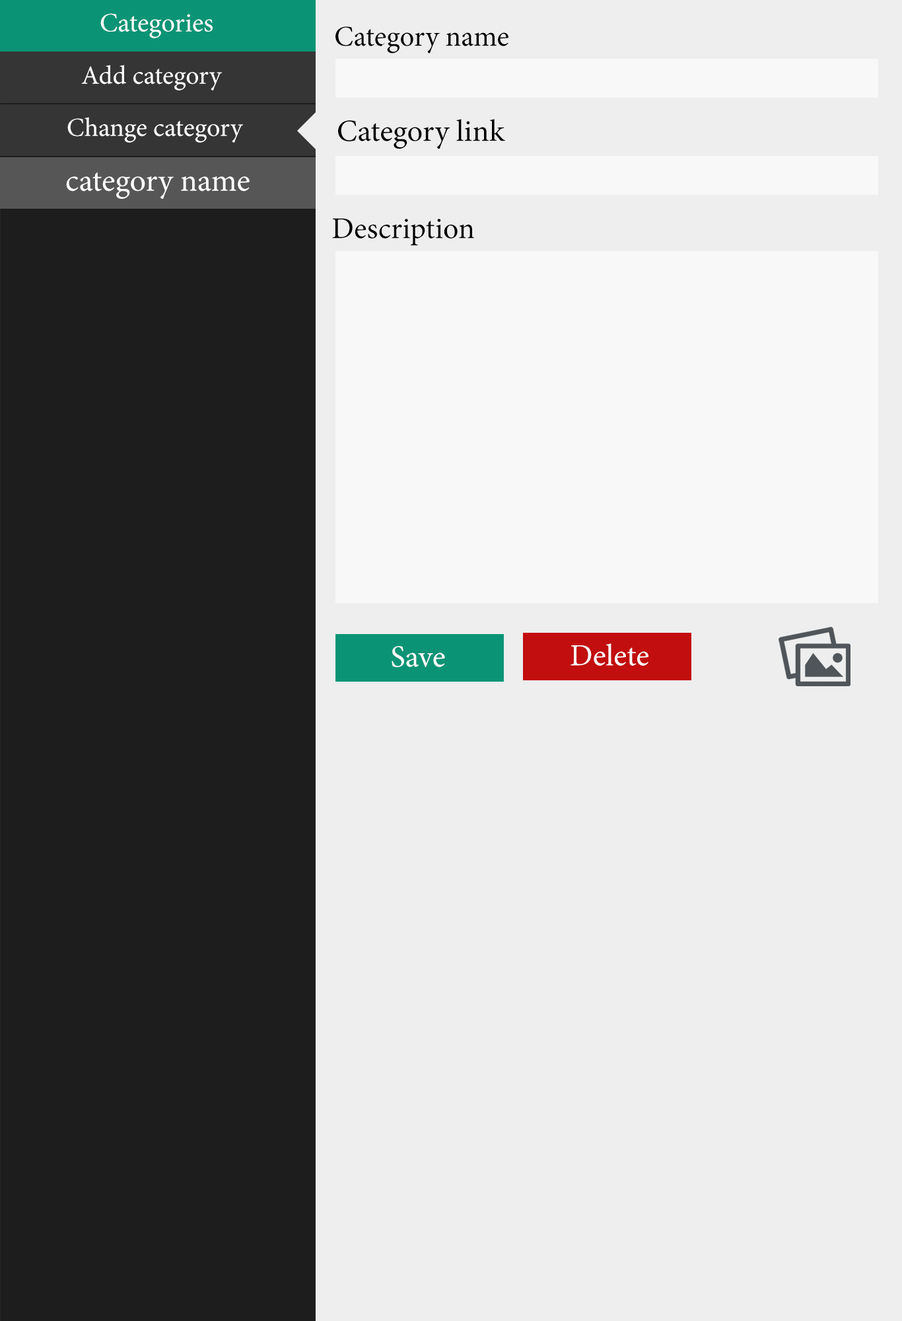
<style>
.page{position:relative;width:902px;height:1321px;background:#eeeeee}
.page>*{position:absolute;margin:0}
.t1{font:26.8px "MinionPro-Regular";color:#ffffff}
.t2{font:29px "MinionPro-Regular";color:#000000}
.t3{font:26.2px "MinionPro-Regular";color:#ffffff}
.t4{font:30.7px "MinionPro-Regular";color:#000000}
.t5{font:31.8px "MinionPro-Regular";color:#ffffff}
.t6{font:30.2px "MinionPro-Regular";color:#000000}
.t7{font:30.7px "MinionPro-Regular";color:#ffffff}
</style>
<div class="page">
<p class="t1" style="left:100px;top:13px;width:113px;height:25px">Categories</p>
<p class="t2" style="left:336px;top:26px;width:173px;height:28px">Category name</p>
<p class="t3" style="left:81px;top:65px;width:141px;height:26px">Add category</p>
<p class="t3" style="left:67px;top:117px;width:176px;height:26px">Change category</p>
<p class="t4" style="left:338px;top:119px;width:167px;height:30px">Category link</p>
<p class="t5" style="left:66px;top:172px;width:184px;height:27px">category name</p>
<p class="t6" style="left:332px;top:218px;width:142px;height:28px">Description</p>
<p class="t7" style="left:392px;top:646px;width:53px;height:21px">Save</p>
<p class="t7" style="left:571px;top:643px;width:78px;height:23px">Delete</p>
</div>
